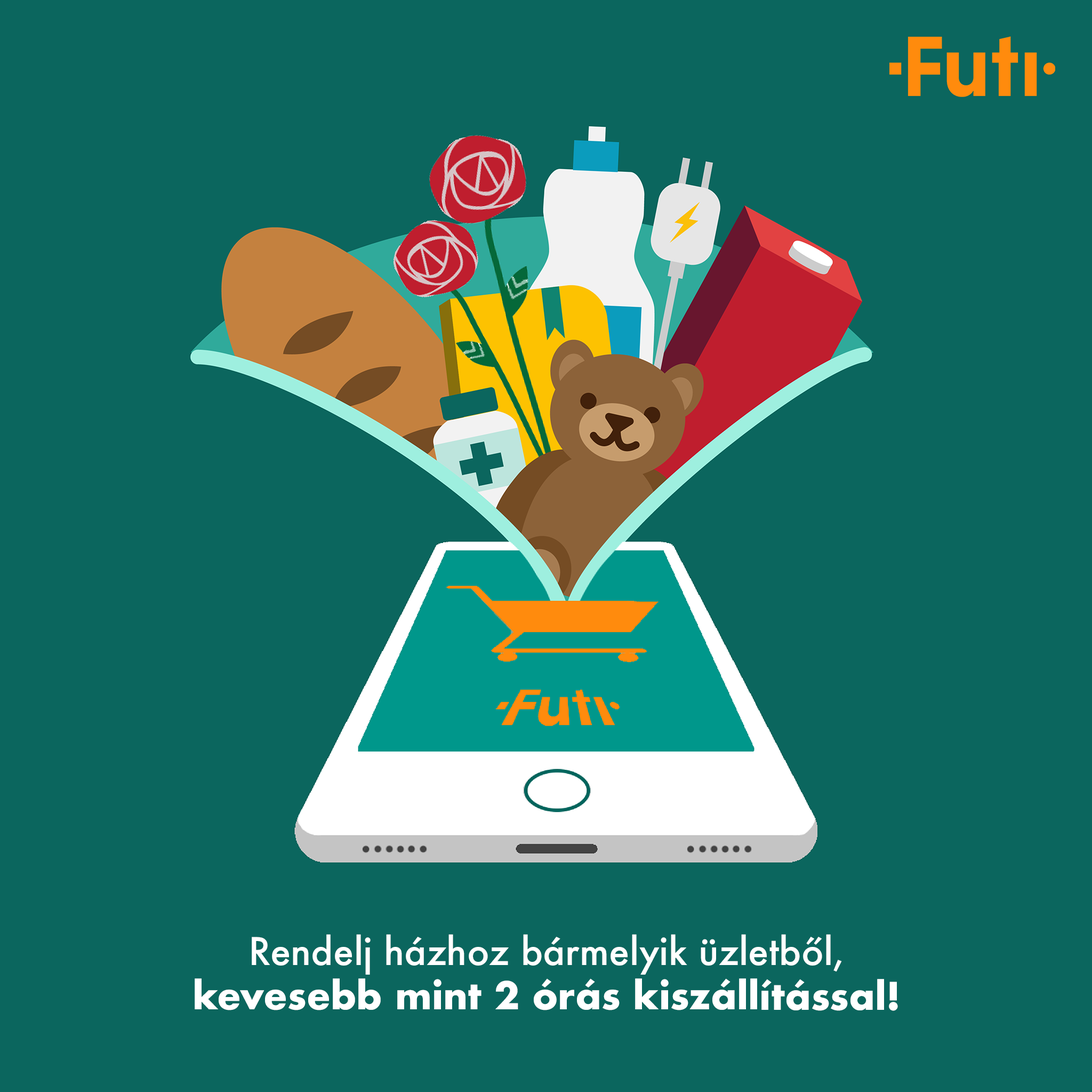
<style>
.page{position:relative;width:1092px;height:1092px;background:#0b665e}
.page>*{position:absolute;margin:0}
.t1{font:37.1px "Futura-Bold";color:#ffffff}
.t2{font:37.1px "Futura-Medium";color:#ffffff}
</style>
<div class="page">
<p class="t1" style="left:195px;top:934px;width:703px;height:77px;text-align:center"><span class="t2">Rendelj házhoz bármelyik üzletből,<br></span>kevesebb mint 2 órás kiszállítással!</p>
</div>
